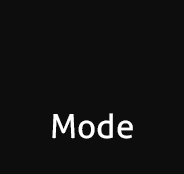
<style>
.page{position:relative;width:184px;height:174px;background:#0d0d0d}
.page>*{position:absolute;margin:0}
.t1{font:33.3px "Aller-Regular";color:#ffffff}
</style>
<div class="page">
<p class="t1" style="left:52px;top:113px;width:81px;height:26px">Mode</p>
</div>
